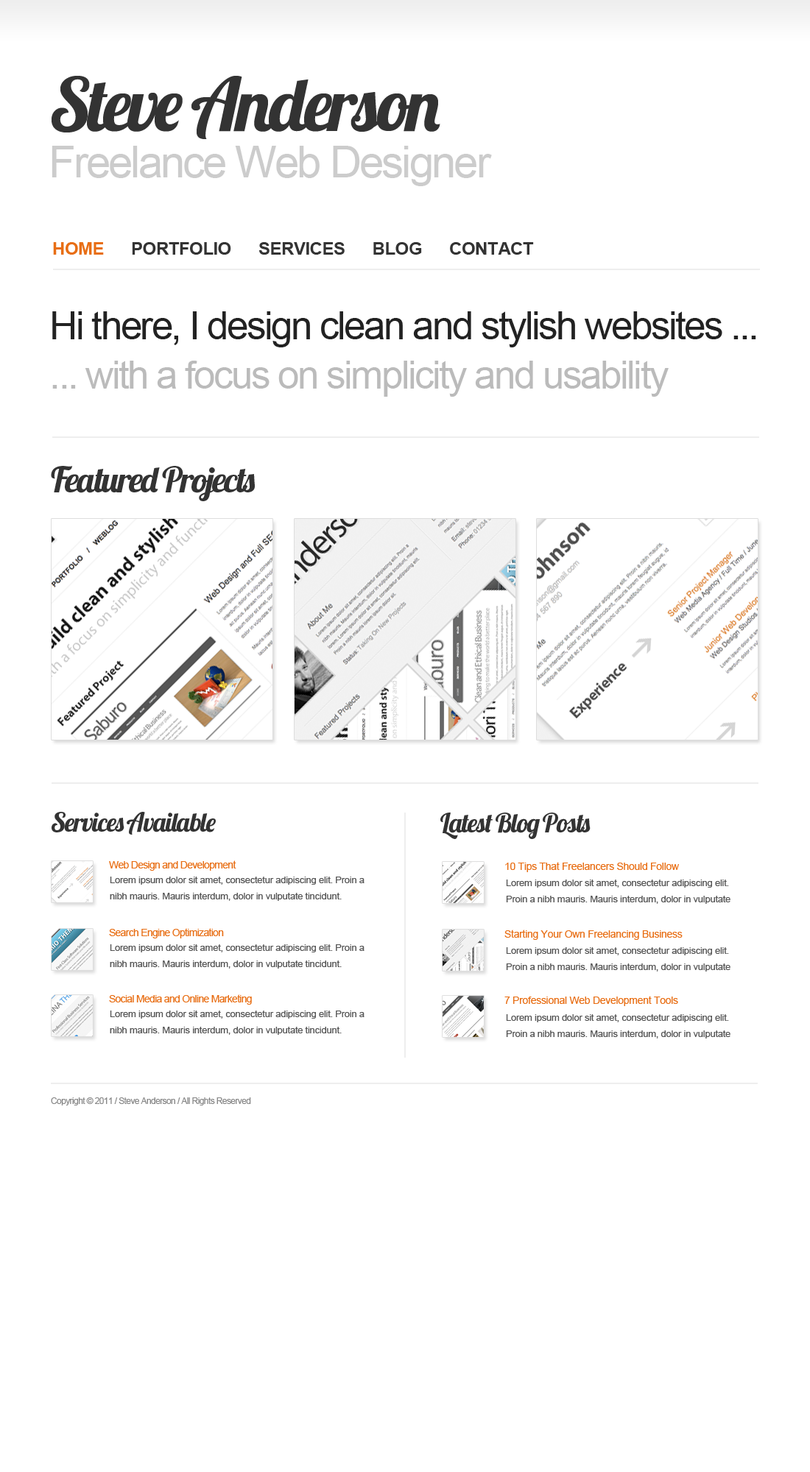
<style>
.page{position:relative;width:810px;height:1472px;background:#ffffff}
.page>*{position:absolute;margin:0}
.t1{font:73.6px "Lobster1.4";letter-spacing:-0.05em;color:#333333}
.t2{font:44.2px "ArialMT";letter-spacing:-0.05em;color:#cccccc}
.t3{font:17.7px "Arial-BoldMT";letter-spacing:-0.02em;color:#333333}
.t4{font:17.7px "Arial-BoldMT";letter-spacing:-0.02em;color:#e86e14}
.t5{font:39.2px/49px "ArialMT";letter-spacing:-0.05em;color:#222222}
.t6{font:39.2px/49px "ArialMT";letter-spacing:-0.05em;color:#bbbbbb}
.t7{font:35.3px "Lobster1.4";letter-spacing:-0.05em;color:#333333}
.t8{font:26.5px "Lobster1.4";letter-spacing:-0.05em;color:#333333}
.t9{font:10.3px "ArialMT";letter-spacing:-0.05em;color:#e86e14}
.t10{font:10.3px "ArialMT";letter-spacing:-0.02em;color:#e86e14}
.t11{font:8.8px/16.2px "ArialMT";letter-spacing:-0.02em;color:#555555;scale:1.09 1}
.t12{font:8.8px "ArialMT";letter-spacing:-0.05em;color:#888888}
</style>
<div class="page">
<p class="t1" style="left:52px;top:76px;width:388px;height:63px">Steve Anderson</p>
<p class="t2" style="left:52px;top:146px;width:440px;height:40px">Freelance Web Designer</p>
<p class="t3" style="left:53px;top:242px;width:481px;height:13px"><span class="t4">HOME   </span>   PORTFOLIO      SERVICES      BLOG      CONTACT</p>
<p class="t5" style="left:52px;top:311px;width:704px;height:86px">Hi there, I design clean and stylish websites ...<br><span class="t6">... with a focus on simplicity and usability</span></p>
<p class="t7" style="left:51px;top:466px;width:204px;height:35px">Featured Projects</p>
<p class="t8" style="left:52px;top:812px;width:164px;height:23px">Services Available</p>
<p class="t8" style="left:440px;top:813px;width:150px;height:26px">Latest Blog Posts</p>
<p class="t9" style="left:109px;top:861px;width:127px;height:10px">Web Design and Development</p>
<p class="t10" style="left:505px;top:862px;width:174px;height:10px">10 Tips That Freelancers Should Follow</p>
<p class="t11" style="left:110px;top:877px;width:254px;height:24px">Lorem ipsum dolor sit amet, consectetur adipiscing elit. Proin a nibh mauris. Mauris interdum, dolor in vulputate tincidunt.</p>
<p class="t11" style="left:506px;top:880px;width:224px;height:24px">Lorem ipsum dolor sit amet, consectetur adipiscing elit. Proin a nibh mauris. Mauris interdum, dolor in vulputate tincidunt.</p>
<p class="t9" style="left:109px;top:928px;width:115px;height:11px">Search Engine Optimization</p>
<p class="t10" style="left:504px;top:930px;width:178px;height:10px">Starting Your Own Freelancing Business</p>
<p class="t11" style="left:110px;top:945px;width:254px;height:24px">Lorem ipsum dolor sit amet, consectetur adipiscing elit. Proin a nibh mauris. Mauris interdum, dolor in vulputate tincidunt.</p>
<p class="t11" style="left:506px;top:948px;width:224px;height:24px">Lorem ipsum dolor sit amet, consectetur adipiscing elit. Proin a nibh mauris. Mauris interdum, dolor in vulputate tincidunt.</p>
<p class="t9" style="left:109px;top:995px;width:143px;height:10px">Social Media and Online Marketing</p>
<p class="t10" style="left:504px;top:996px;width:174px;height:10px">7 Professional Web Development Tools</p>
<p class="t11" style="left:110px;top:1011px;width:254px;height:24px">Lorem ipsum dolor sit amet, consectetur adipiscing elit. Proin a nibh mauris. Mauris interdum, dolor in vulputate tincidunt.</p>
<p class="t11" style="left:506px;top:1015px;width:224px;height:24px">Lorem ipsum dolor sit amet, consectetur adipiscing elit. Proin a nibh mauris. Mauris interdum, dolor in vulputate tincidunt.</p>
<p class="t12" style="left:51px;top:1098px;width:200px;height:8px">Copyright © 2011 / Steve Anderson / All Rights Reserved</p>
</div>
